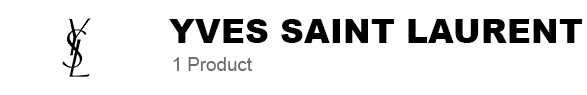
<style>
.page{position:relative;width:587px;height:95px;background:#ffffff}
.page>*{position:absolute;margin:0}
.t1{font:33.3px "Arial-Black";color:#000000}
.t2{font:18.7px "ArialMT";color:#6d6d6d}
</style>
<div class="page">
<p class="t1" style="left:169px;top:19px;width:413px;height:24px">YVES SAINT LAURENT</p>
<p class="t2" style="left:173px;top:57px;width:79px;height:14px">1 Product</p>
</div>
